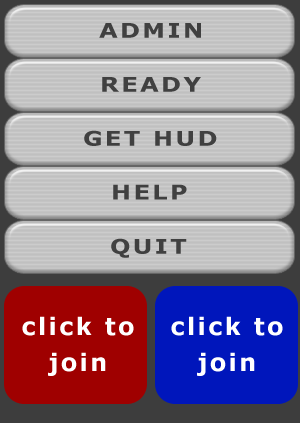
<style>
.page{position:relative;width:300px;height:423px}
.page>*{position:absolute;margin:0}
.t1{font:20.2px "Verdana-Bold";letter-spacing:0.1em;color:#404040;scale:1.19 1}
.t2{font:24px/36px "Verdana-Bold";letter-spacing:0.1em;color:#ffffff}
</style>
<div class="page">
<p class="t1" style="left:99px;top:23px;width:102px;height:15px">ADMIN</p>
<p class="t1" style="left:102px;top:77px;width:99px;height:15px">READY</p>
<p class="t1" style="left:84px;top:130px;width:133px;height:16px">GET HUD</p>
<p class="t1" style="left:113px;top:184px;width:74px;height:16px">HELP</p>
<p class="t1" style="left:111px;top:238px;width:76px;height:20px">QUIT</p>
<p class="t2" style="left:22px;top:316px;width:112px;height:60px;text-align:center">click to<br>join</p>
<p class="t2" style="left:171px;top:316px;width:112px;height:60px;text-align:center">click to<br>join</p>
</div>
